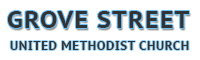
<style>
.page{position:relative;width:200px;height:60px;background:#ffffff}
.page>*{position:absolute;margin:0}
.t1{font:24px "PTSans-CaptionBold";letter-spacing:0.05em;color:#333333;text-transform:uppercase}
.t2{font:12px "PTSans-CaptionBold";letter-spacing:0.05em;color:#333333;text-transform:uppercase}
</style>
<div class="page">
<p class="t1" style="left:7px;top:11px;width:182px;height:17px">Grove Street</p>
<p class="t2" style="left:10px;top:41px;width:179px;height:9px">United Methodist Church</p>
</div>
